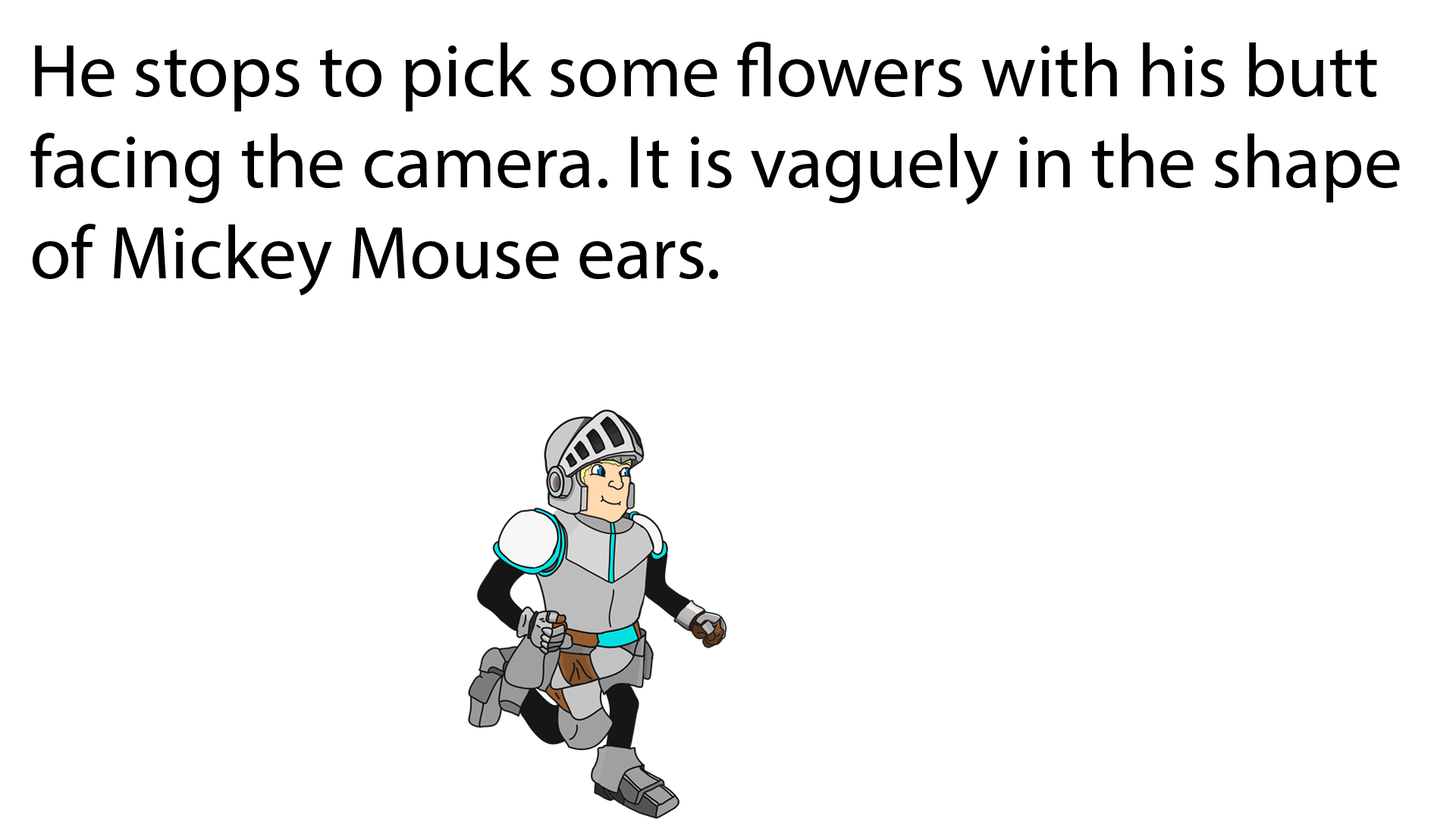
<style>
.page{position:relative;width:1456px;height:819px;background:#ffffff}
.page>*{position:absolute;margin:0}
.t1{font:75.8px "MyriadPro-Regular";color:#000000}
</style>
<div class="page">
<p class="t1" style="left:30px;top:42px;width:1370px;height:254px">He stops to pick some flowers with his butt facing the camera. It is vaguely in the shape of Mickey Mouse ears.</p>
</div>
